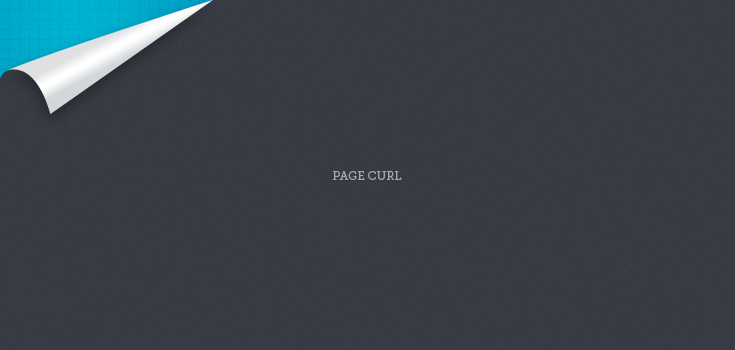
<style>
.page{position:relative;width:735px;height:350px;background:#363a42}
.page>*{position:absolute;margin:0}
.t1{font:12px "MuseoSlab-500";color:#a3a7ae;text-transform:uppercase}
</style>
<div class="page">
<p class="t1" style="left:333px;top:171px;width:69px;height:9px">page curl</p>
</div>
